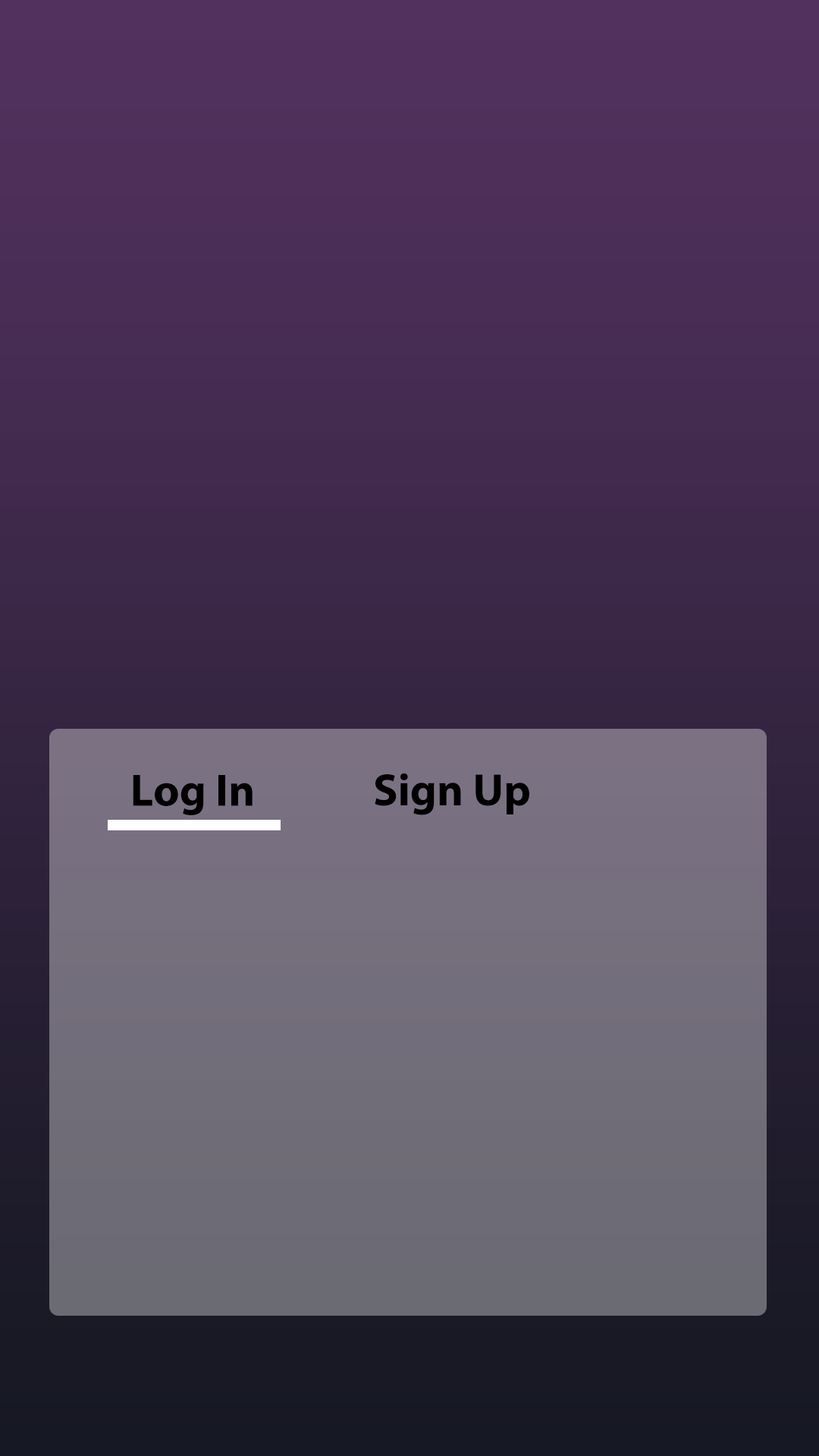
<style>
.page{position:relative;width:819px;height:1456px}
.page>*{position:absolute;margin:0}
.t1{font:45.5px "MyriadPro-Bold";color:#000000}
</style>
<div class="page">
<p class="t1" style="left:375px;top:773px;width:154px;height:42px">Sign Up</p>
<p class="t1" style="left:133px;top:775px;width:120px;height:40px">Log In</p>
</div>
